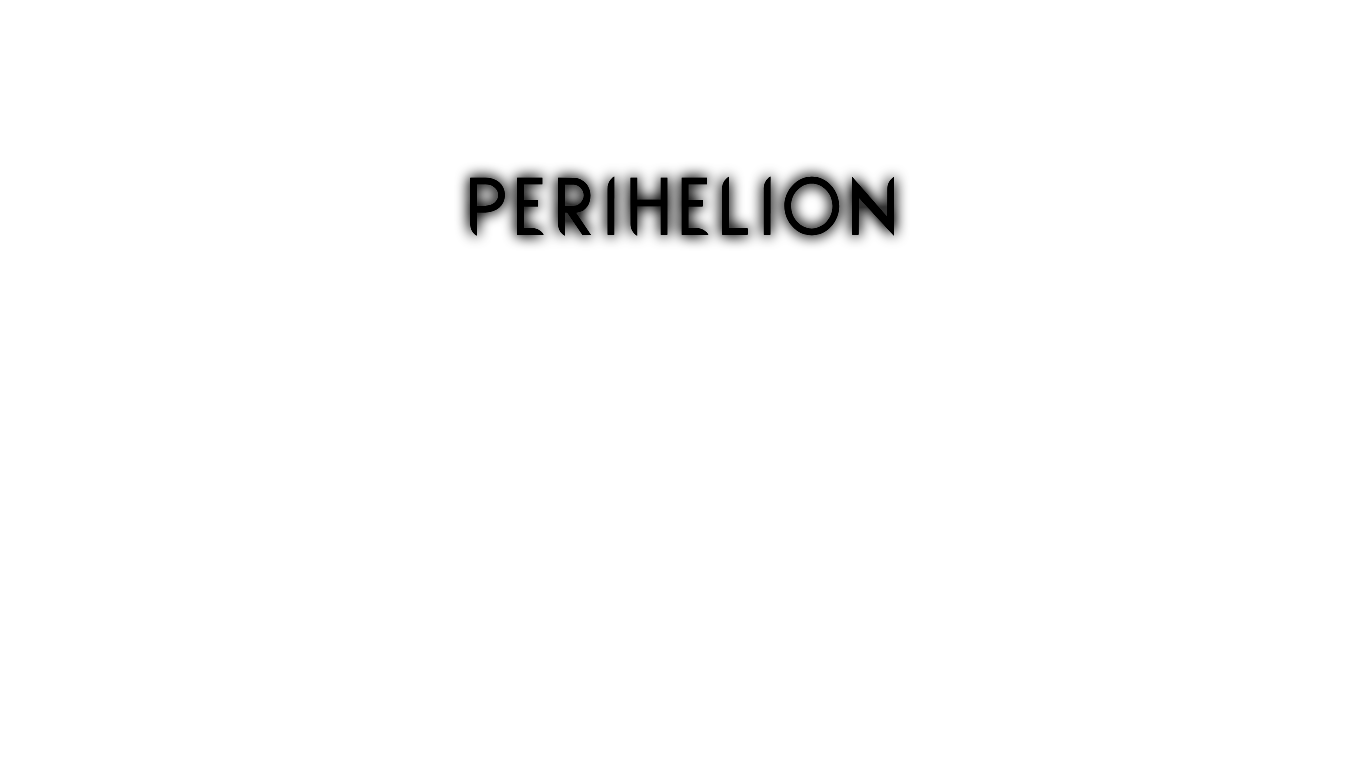
<style>
.page{position:relative;width:1366px;height:768px;background:#ffffff}
.page>*{position:absolute;margin:0}
.t1{font:95.8px "Raindondo";color:#000000}
</style>
<div class="page">
<p class="t1" style="left:470px;top:176px;width:424px;height:60px">Perihelion</p>
</div>
